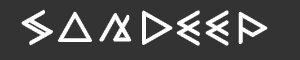
<style>
.page{position:relative;width:300px;height:60px;background:#333333}
.page>*{position:absolute;margin:0}
.t1{font:36px "Quarz974Light";letter-spacing:0.25em;color:#ffffff;font-weight:bold}
</style>
<div class="page">
<p class="t1" style="left:22px;top:10px;width:245px;height:35px">sandeep</p>
</div>
